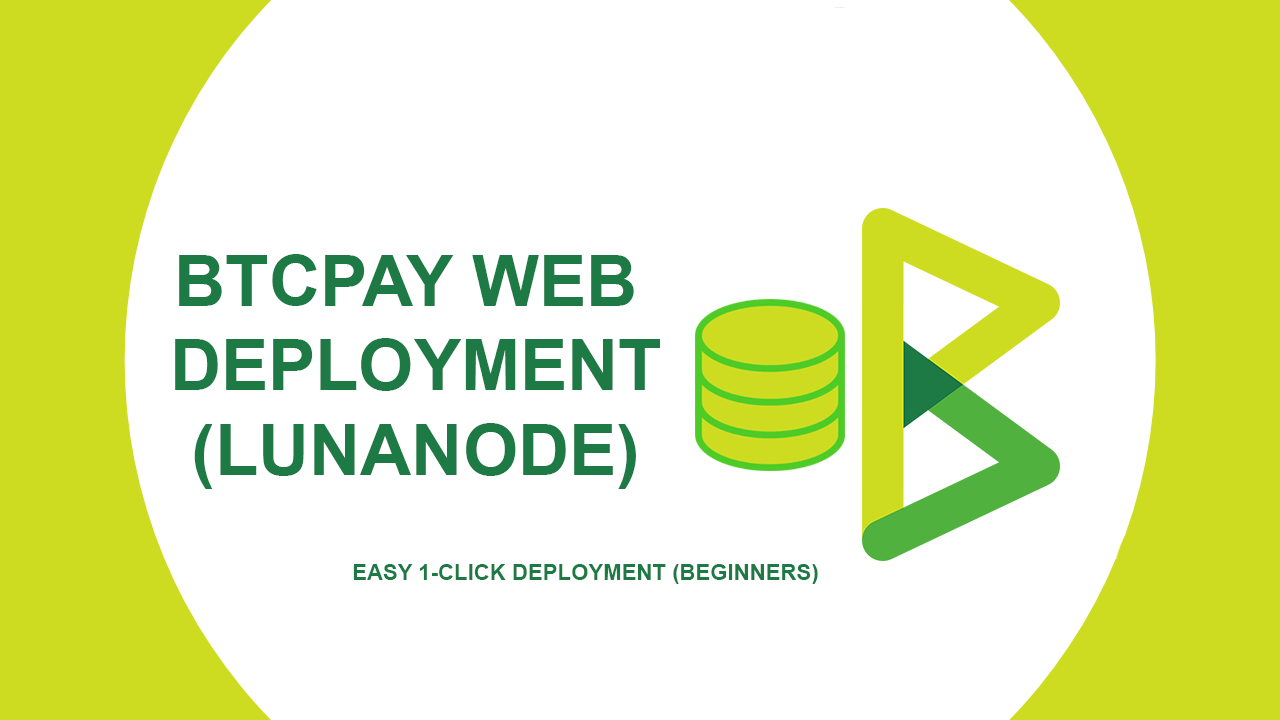
<style>
.page{position:relative;width:1280px;height:720px;background:#ffffff}
.page>*{position:absolute;margin:0}
.t1{font:70.8px "Arial-BoldMT";color:#1e7a44}
.t2{font:22.2px "Arial-BoldMT";color:#1e7a44}
</style>
<div class="page">
<p class="t1" style="left:175px;top:254px;width:485px;height:235px;text-align:center">BTCPAY WEB <br>DEPLOYMENT<br>(LUNANODE)</p>
<p class="t2" style="left:353px;top:564px;width:465px;height:20px">EASY 1-CLICK DEPLOYMENT (BEGINNERS)</p>
</div>
